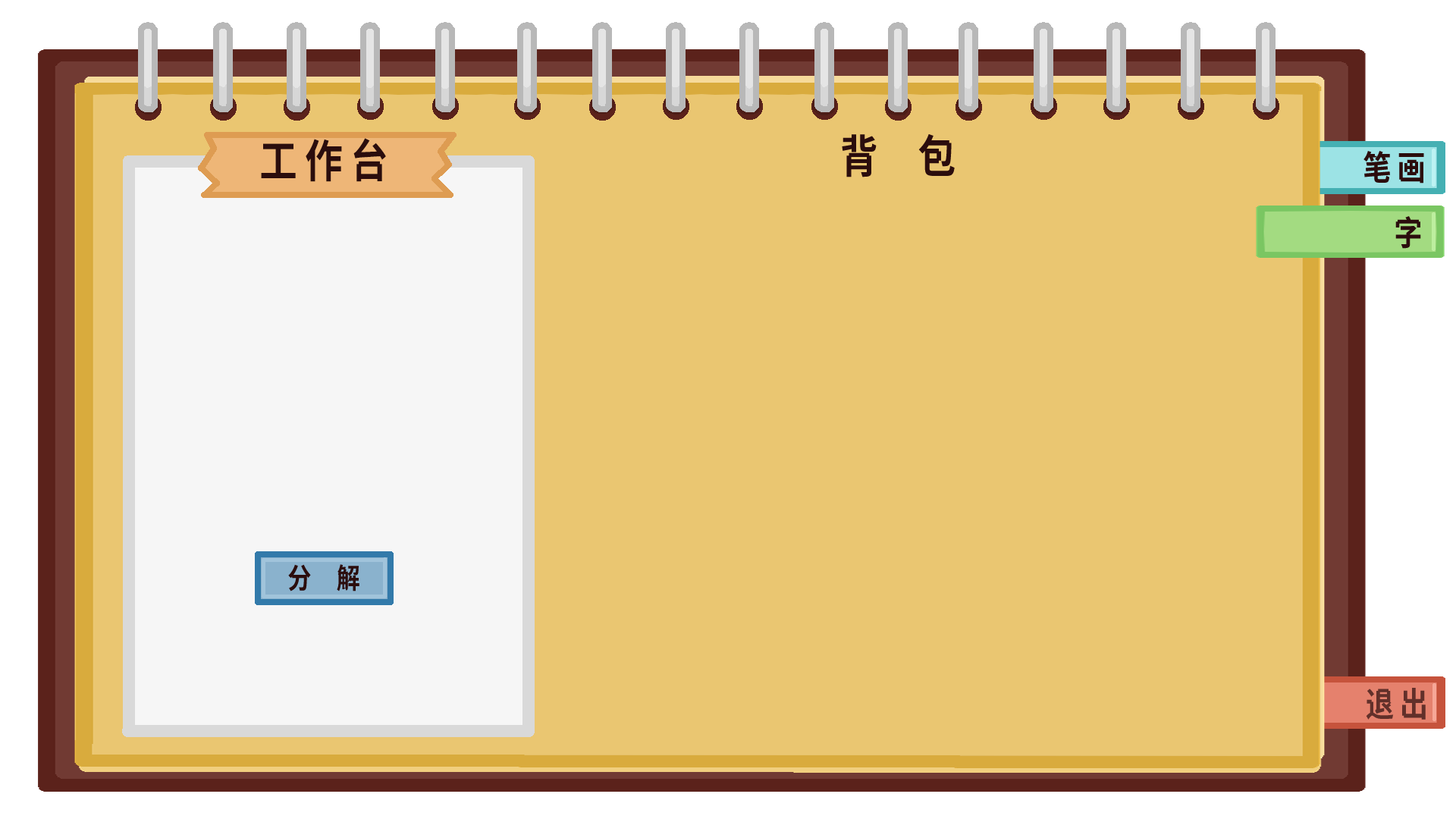
<style>
.page{position:relative;width:1456px;height:819px;background:#eac671}
.page>*{position:absolute;margin:0}
.t1{font:45.5px "SweiAliasLegCJKsc-Bold";letter-spacing:0.2em;color:#2b0d0d;text-transform:uppercase;scale:0.83 1}
.t2{font:45.5px "SweiAliasLegCJKsc-Bold";letter-spacing:0.2em;color:#2b0d0d;font-variant:small-caps;scale:0.83 1}
.t3{font:34.1px "SweiAliasLegCJKsc-Bold";letter-spacing:0.2em;color:#2b0d0d;text-transform:uppercase;scale:0.83 1}
.t4{font:28.4px "SweiAliasLegCJKsc-Bold";letter-spacing:0.2em;color:#2b0d0d;text-transform:uppercase;scale:0.83 1}
.t5{font:34.1px "SweiAliasLegCJKsc-Bold";letter-spacing:0.2em;color:#62302a;text-transform:uppercase;scale:0.83 1}
</style>
<div class="page">
<p class="t1" style="left:842px;top:134px;width:113px;height:43px">背  包</p>
<p class="t2" style="left:261px;top:138px;width:125px;height:44px">工作台</p>
<p class="t3" style="left:1363px;top:151px;width:61px;height:33px">笔画</p>
<p class="t3" style="left:1395px;top:216px;width:26px;height:33px">字</p>
<p class="t4" style="left:288px;top:564px;width:71px;height:27px">分  解</p>
<p class="t5" style="left:1366px;top:688px;width:60px;height:32px">退出</p>
</div>
